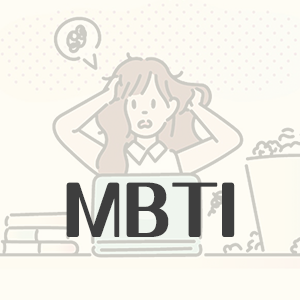
<style>
.page{position:relative;width:300px;height:300px;background:#fefcf4}
.page>*{position:absolute;margin:0}
.t1{font:60px "TTSantoriniR";color:#3e3e3e}
</style>
<div class="page">
<p class="t1" style="left:66px;top:182px;width:169px;height:55px">MBTI</p>
</div>
